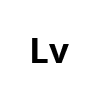
<style>
.page{position:relative;width:100px;height:100px;background:#ffffff}
.page>*{position:absolute;margin:0}
.t1{font:35px "OpenSans-Bold";color:#000000}
</style>
<div class="page">
<p class="t1" style="left:32px;top:38px;width:37px;height:25px">Lv</p>
</div>
